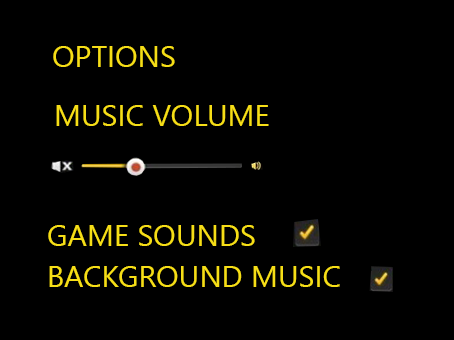
<style>
.page{position:relative;width:454px;height:340px;background:#000000}
.page>*{position:absolute;margin:0}
.t1{font:30px "LeelawadeeUI";color:#f6de17}
</style>
<div class="page">
<p class="t1" style="left:53px;top:46px;width:122px;height:21px">OPTIONS</p>
<p class="t1" style="left:56px;top:105px;width:213px;height:21px">MUSIC VOLUME</p>
<p class="t1" style="left:48px;top:225px;width:207px;height:21px">GAME SOUNDS</p>
<p class="t1" style="left:49px;top:266px;width:291px;height:21px">BACKGROUND MUSIC</p>
</div>
